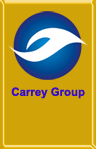
<style>
.page{position:relative;width:96px;height:149px;background:#d0a309}
.page>*{position:absolute;margin:0}
.t1{font:11.4px "Arial-BoldMT";color:#340bcf}
</style>
<div class="page">
<p class="t1" style="left:11px;top:87px;width:74px;height:12px">Carrey Group</p>
</div>
